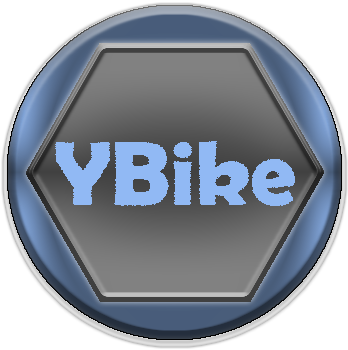
<style>
.page{position:relative;width:348px;height:350px;background:#ffffff}
.page>*{position:absolute;margin:0}
.t1{font:91.7px "BerlinSansFBDemi-Bold";color:#91b9f4}
</style>
<div class="page">
<p class="t1" style="left:55px;top:141px;width:240px;height:65px">YBike</p>
</div>
